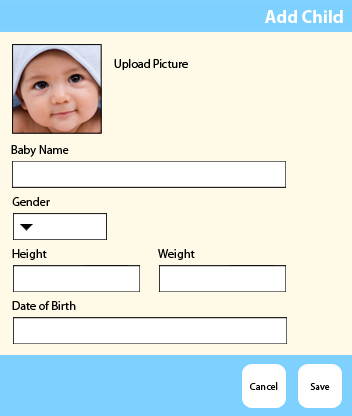
<style>
.page{position:relative;width:352px;height:416px;background:#fffae8}
.page>*{position:absolute;margin:0}
.t1{font:18px "MyriadPro-Bold";color:#ffffff}
.t2{font:12px "MyriadPro-Regular";color:#000000}
.t3{font:12.2px "MyriadPro-Regular";color:#000000}
.t4{font:10px "MyriadPro-Regular";color:#000000}
</style>
<div class="page">
<p class="t1" style="left:265px;top:10px;width:78px;height:13px">Add Child</p>
<p class="t2" style="left:114px;top:59px;width:74px;height:11px">Upload Picture</p>
<p class="t3" style="left:11px;top:145px;width:58px;height:12px">Baby Name</p>
<p class="t3" style="left:12px;top:197px;width:38px;height:9px">Gender</p>
<p class="t3" style="left:12px;top:249px;width:35px;height:11px">Height</p>
<p class="t3" style="left:158px;top:249px;width:37px;height:11px">Weight</p>
<p class="t3" style="left:12px;top:301px;width:64px;height:9px">Date of Birth</p>
<p class="t4" style="left:250px;top:382px;width:28px;height:8px">Cancel</p>
<p class="t4" style="left:310px;top:383px;width:20px;height:7px">Save</p>
</div>
